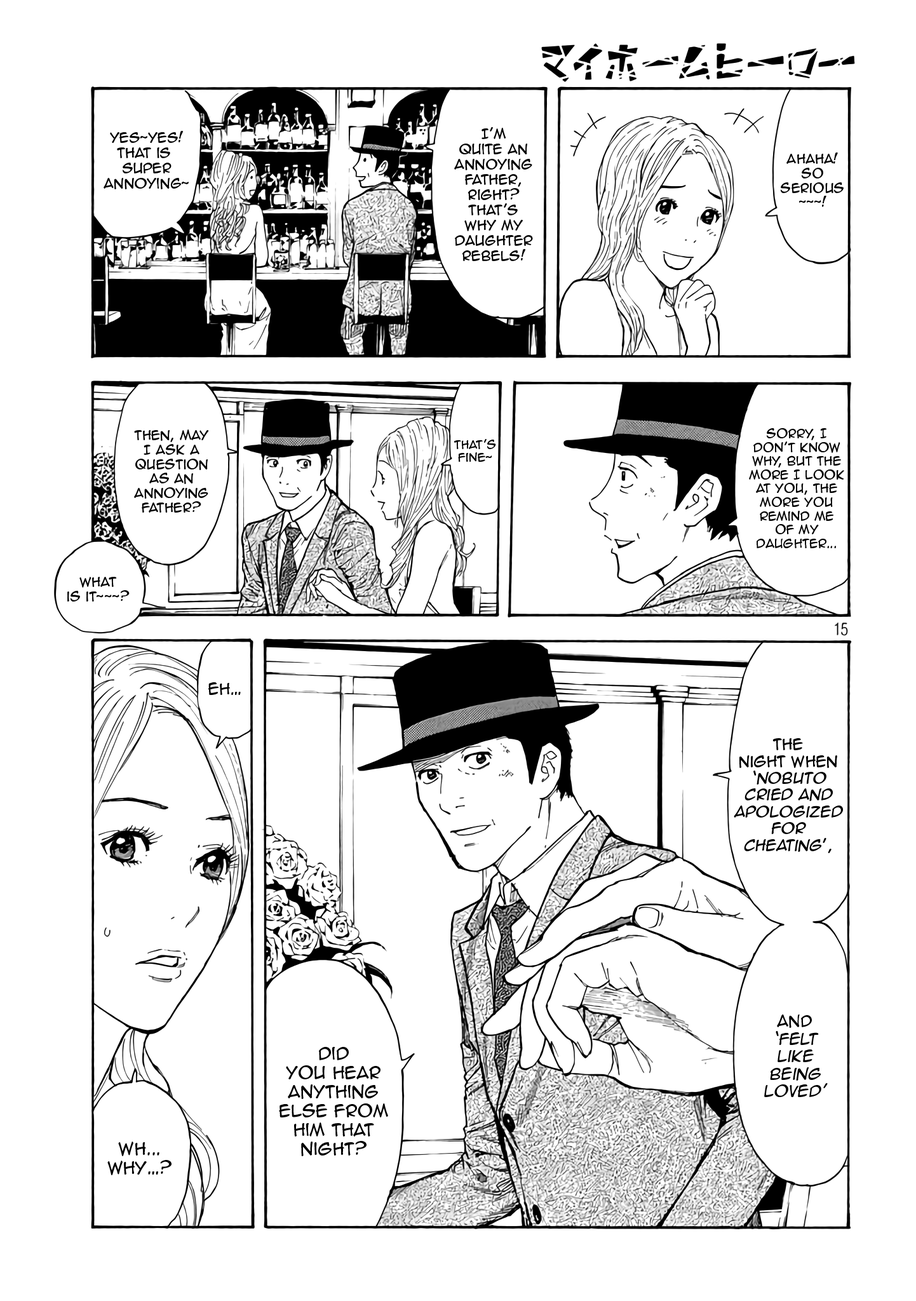
<style>
.page{position:relative;width:916px;height:1301px;background:#ffffff}
.page>*{position:absolute;margin:0}
.t1{font:12.7px "AnimeAce2.0BB";color:#000000}
.t2{font:12.1px "AnimeAce2.0BB";color:#000000}
.t3{font:11.4px "AnimeAce2.0BB";color:#000000}
.t4{font:10.8px "AnimeAce2.0BB";color:#000000}
.t5{font:14.6px "AnimeAce2.0BB";color:#000000}
.t6{font:14px "AnimeAce2.0BB";color:#000000;font-style:italic}
.t7{font:14px "AnimeAce2.0BB";color:#000000}
.t8{font:14.6px "AnimeAce2.0BB";color:#000000;font-style:italic}
.t9{font:15.9px "AnimeAce2.0BB";color:#000000}
</style>
<div class="page">
<p class="t1" style="left:104px;top:131px;width:85px;height:58px;text-align:center">yes~yes!<br>That is <br>super<br>annoying~</p>
<p class="t1" style="left:454px;top:127px;width:79px;height:134px;text-align:center">I’m<br>quite an<br>annoying<br>father,<br>right?<br>That’s<br>why my<br>daughter<br>rebels!</p>
<p class="t2" style="left:780px;top:153px;width:64px;height:54px;text-align:center">ahaha!<br>so<br>serious<br>~~~!</p>
<p class="t2" style="left:134px;top:430px;width:75px;height:83px;text-align:center">Then, may<br>I ask a<br>question<br>as an<br>annoying<br>father?</p>
<p class="t3" style="left:749px;top:428px;width:95px;height:120px;text-align:center">Sorry, I<br>don’t know<br>why, but the<br>more I look<br>at you, the<br>more you<br>remind me<br>of my<br>daughter...</p>
<p class="t4" style="left:454px;top:439px;width:42px;height:23px;text-align:center">that’s<br>fine~</p>
<p class="t2" style="left:67px;top:577px;width:63px;height:25px;text-align:center">WHat<br>is it~~~?</p>
<p class="t5" style="left:208px;top:682px;width:33px;height:13px">eh…</p>
<p class="t6" style="left:734px;top:738px;width:110px;height:115px;text-align:center"><span class="t7">The<br>night when<br></span>‘Nobuto<br>cried and<br>apologized<br>for<br>cheating<span class="t7">’,</span></p>
<p class="t8" style="left:764px;top:1015px;width:64px;height:82px;text-align:center"><span class="t5">and<br></span>‘felt<br>like<br>being<br>loved’</p>
<p class="t9" style="left:279px;top:1047px;width:109px;height:109px;text-align:center">did<br>you hear<br>anything<br>else from<br>him that<br>night?</p>
<p class="t9" style="left:107px;top:1142px;width:65px;height:34px;text-align:center">wh...<br>why…?</p>
</div>
